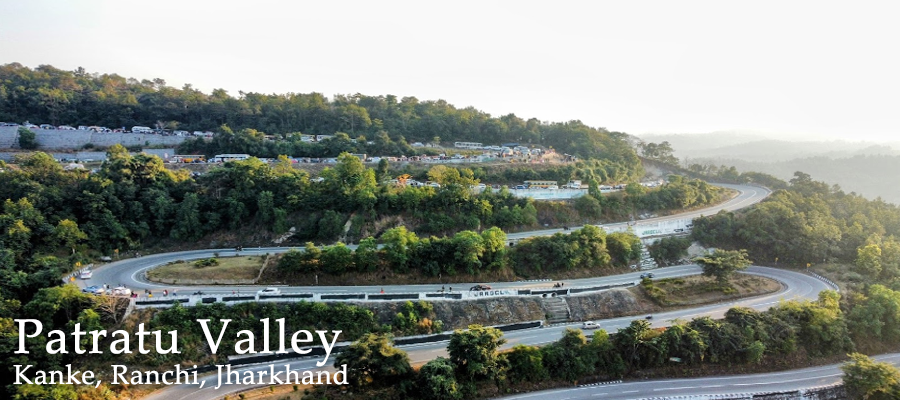
<style>
.page{position:relative;width:900px;height:400px}
.page>*{position:absolute;margin:0}
.t1{font:48.1px "PalatinoLinotype-Roman";color:#ffffff;font-weight:bold}
.t2{font:27px "PalatinoLinotype-Roman";color:#ffffff;font-weight:bold}
</style>
<div class="page">
<p class="t1" style="left:14px;top:317px;width:328px;height:50px">Patratu Valley</p>
<p class="t2" style="left:13px;top:364px;width:336px;height:26px">Kanke, Ranchi, Jharkhand</p>
</div>
